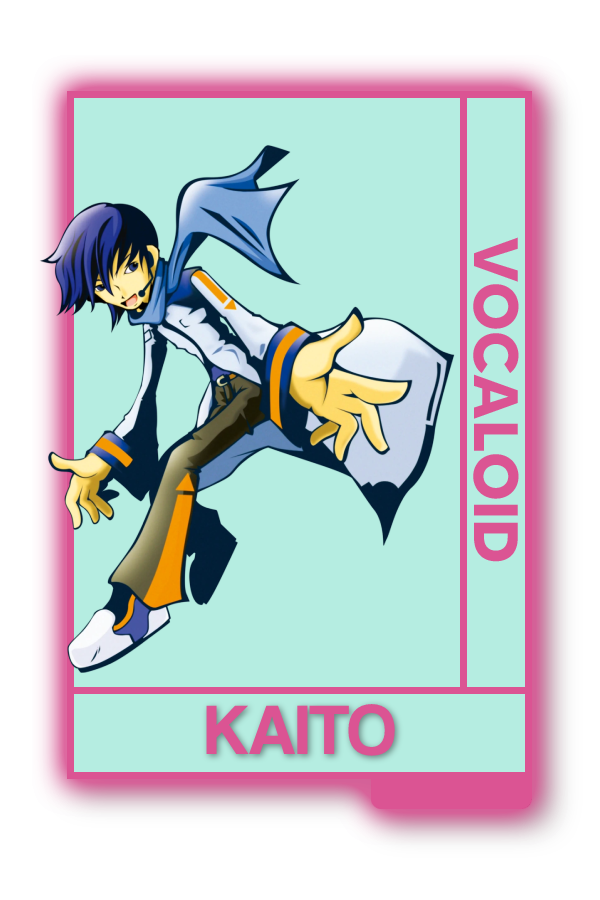
<style>
.page{position:relative;width:600px;height:900px;background:#b5ede1}
.page>*{position:absolute;margin:0}
.t1{font:62.5px "MADETOMMY-Bold";color:#db5493}
.t2{font:72.8px "CoolveticaRg-Regular";color:#db5493}
</style>
<div class="page">
<p class="t1" style="left:473px;top:237px;width:46px;height:325px;rotate:90deg">VOCALOID</p>
<p class="t2" style="left:206px;top:704px;width:189px;height:52px">KAITO</p>
</div>
